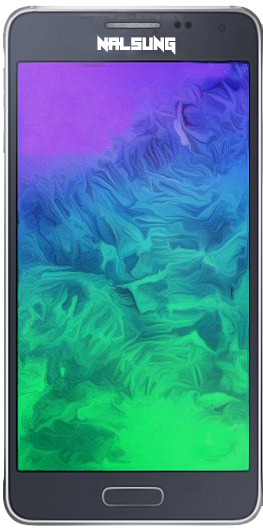
<style>
.page{position:relative;width:263px;height:528px}
.page>*{position:absolute;margin:0}
.t1{font:18px "Sheeping-Dogs";color:#ffffff}
</style>
<div class="page">
<p class="t1" style="left:97px;top:35px;width:79px;height:20px">NALSUNG</p>
</div>
